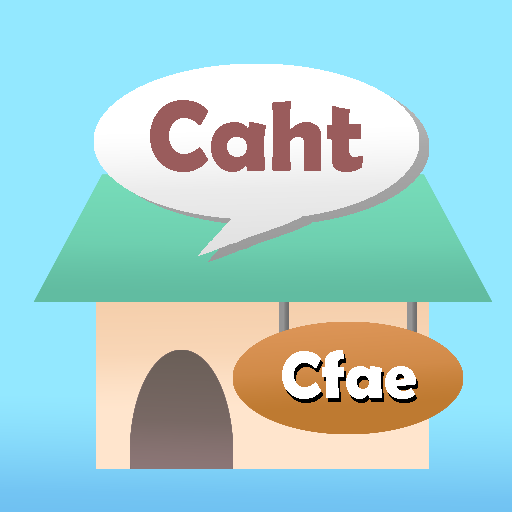
<style>
.page{position:relative;width:512px;height:512px;background:#93e8ff}
.page>*{position:absolute;margin:0}
.t1{font:100px "BerlinSansFBDemi-Bold";color:#9a5c5c}
.t2{font:66.7px "BerlinSansFBDemi-Bold";color:#ffffff}
</style>
<div class="page">
<p class="t1" style="left:150px;top:100px;width:213px;height:72px">Caht</p>
<p class="t2" style="left:282px;top:350px;width:134px;height:49px">Cfae</p>
</div>
